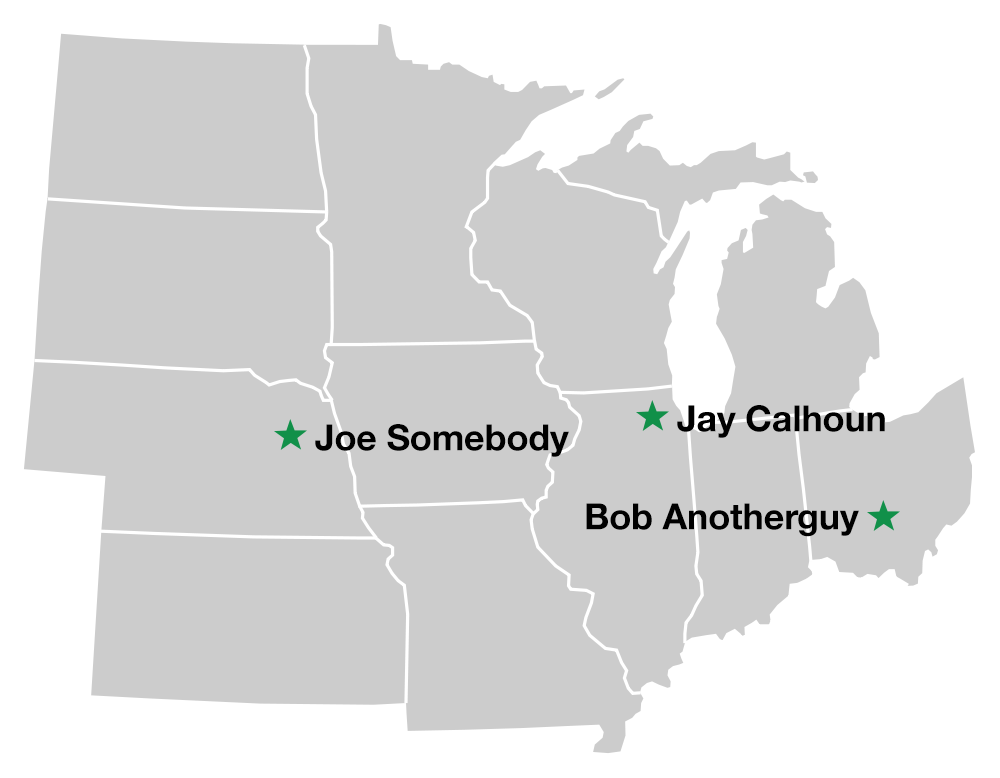
<style>
.page{position:relative;width:1000px;height:778px;background:#cccccc}
.page>*{position:absolute;margin:0}
.t1{font:36px "HelveticaNeue-Bold";letter-spacing:-0.005em;color:#000000}
</style>
<div class="page">
<p class="t1" style="left:677px;top:405px;width:208px;height:33px">Jay Calhoun</p>
<p class="t1" style="left:315px;top:424px;width:254px;height:33px">Joe Somebody</p>
<p class="t1" style="left:586px;top:503px;width:273px;height:34px">Bob Anotherguy</p>
</div>
